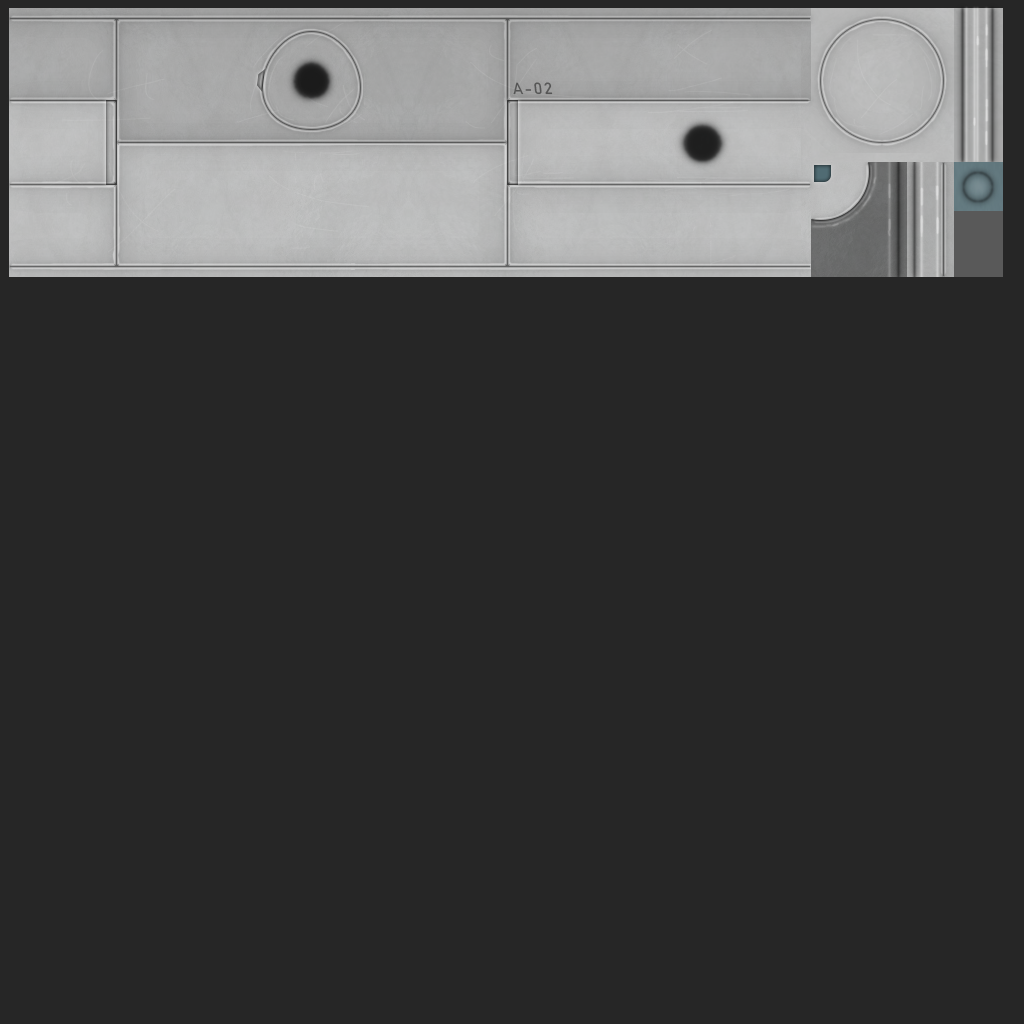
<style>
.page{position:relative;width:1024px;height:1024px;background:#262626}
.page>*{position:absolute;margin:0}
.t1{font:16.1px "Bahnschrift";letter-spacing:0.1em;color:#565756}
</style>
<div class="page">
<p class="t1" style="left:513px;top:82px;width:40px;height:13px">A-02</p>
</div>
